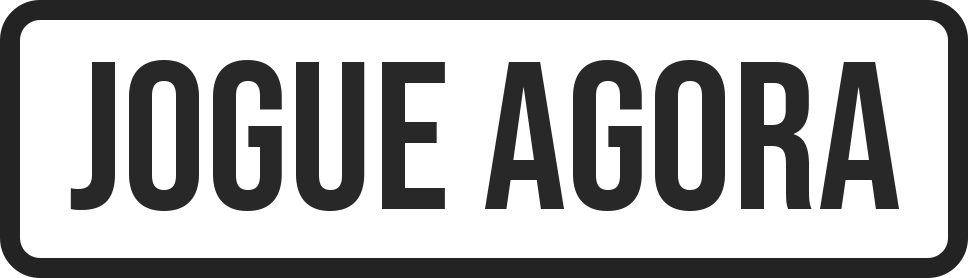
<style>
.page{position:relative;width:968px;height:278px;background:#ffffff}
.page>*{position:absolute;margin:0}
.t1{font:209.9px "BebasNeue-Regular";color:#282828}
</style>
<div class="page">
<p class="t1" style="left:70px;top:60px;width:829px;height:151px">jogue agora</p>
</div>
